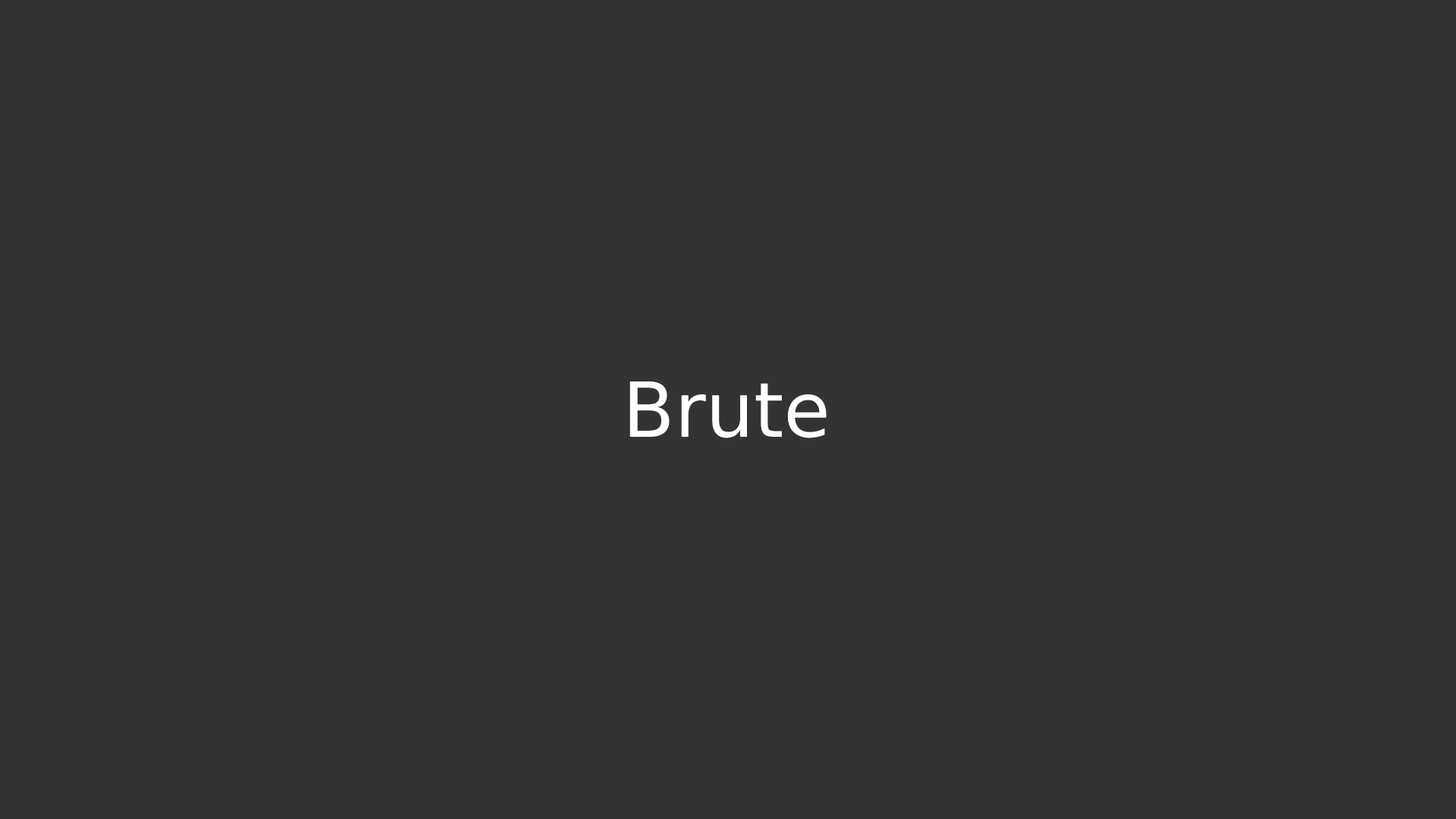
<style>
.page{position:relative;width:1456px;height:819px;background:#333333}
.page>*{position:absolute;margin:0}
.t1{font:75.8px "DejaVuSans";color:#ffffff}
</style>
<div class="page">
<p class="t1" style="left:629px;top:381px;width:198px;height:57px">Brute</p>
</div>
